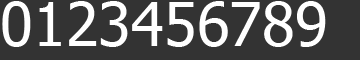
<style>
.page{position:relative;width:360px;height:60px;background:#333333}
.page>*{position:absolute;margin:0}
.t1{font:60px "Tahoma";color:#ffffff}
</style>
<div class="page">
<p class="t1" style="left:2px;top:1px;width:324px;height:46px">0123456789</p>
</div>
